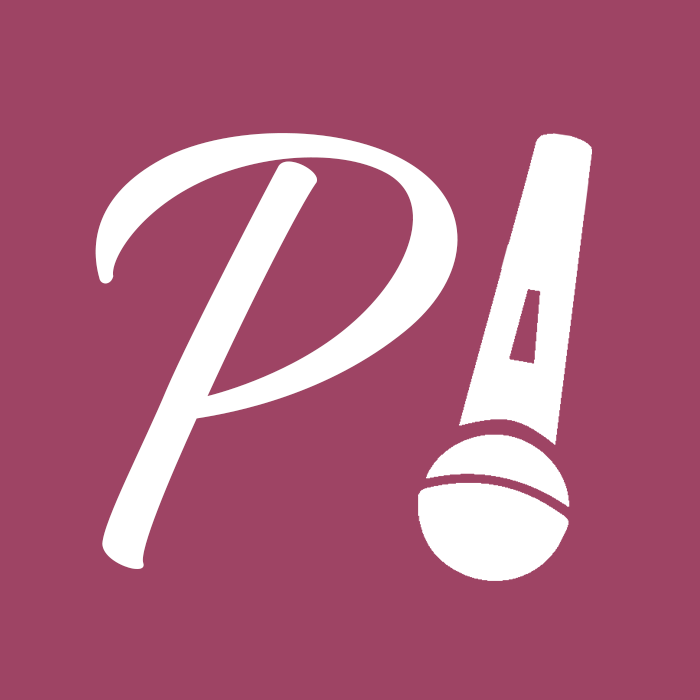
<style>
.page{position:relative;width:700px;height:700px;background:#9e4464}
.page>*{position:absolute;margin:0}
.t1{font:600px "Relation";color:#ffffff}
</style>
<div class="page">
<p class="t1" style="left:95px;top:133px;width:363px;height:436px">P</p>
</div>
